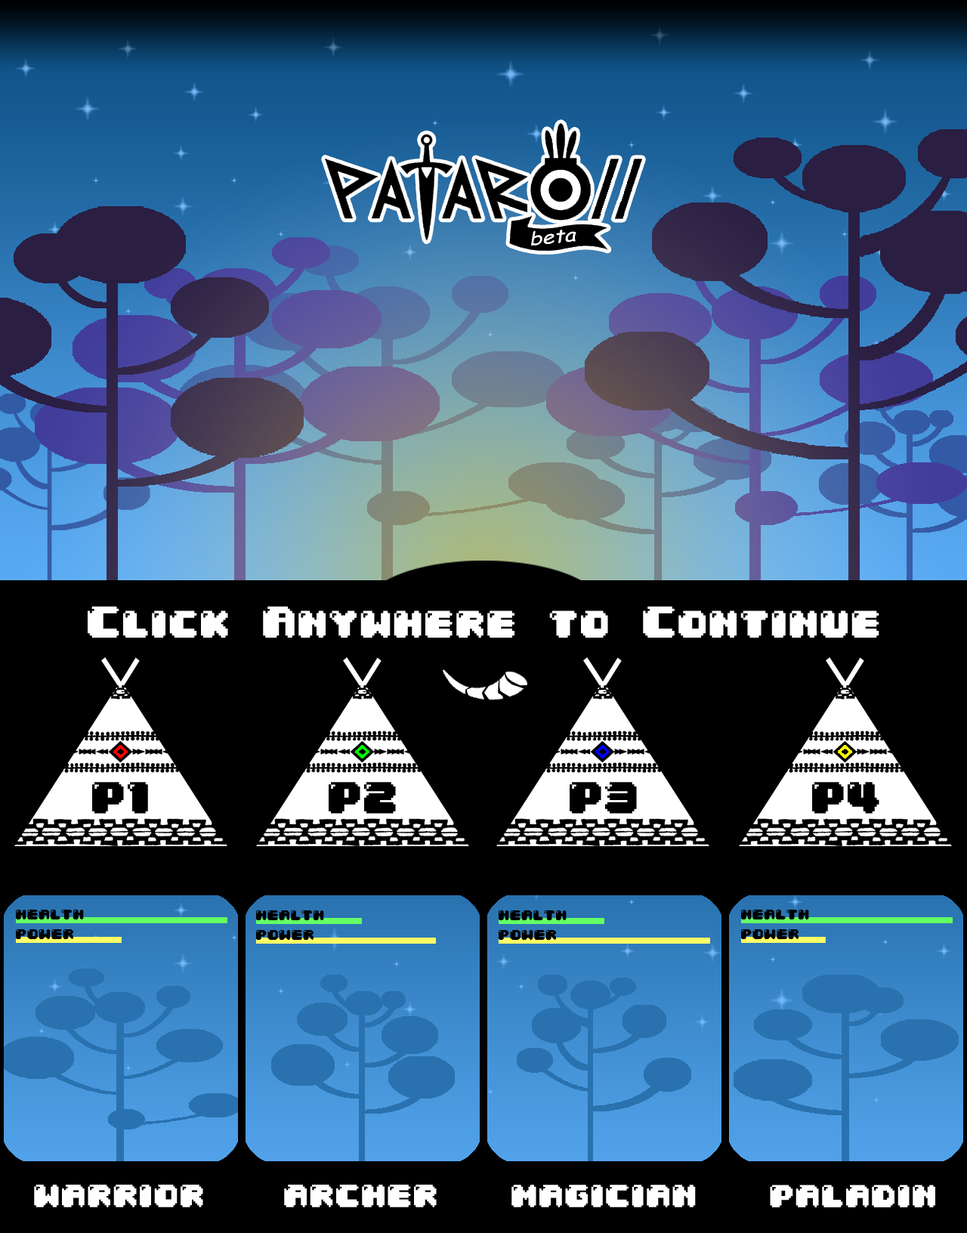
<style>
.page{position:relative;width:967px;height:1233px;background:#000000}
.page>*{position:absolute;margin:0}
.t1{font:37.8px "04b30";color:#ffffff}
.t2{font:14.2px "04b30";color:#000000}
.t3{font:31.5px "04b30";color:#ffffff}
</style>
<div class="page">
<p class="t1" style="left:88px;top:606px;width:791px;height:32px">Click Anywhere to Continue</p>
<p class="t2" style="left:16px;top:910px;width:68px;height:9px">health</p>
<p class="t2" style="left:256px;top:910px;width:68px;height:10px">health</p>
<p class="t2" style="left:499px;top:910px;width:68px;height:10px">health</p>
<p class="t2" style="left:741px;top:910px;width:68px;height:9px">health</p>
<p class="t2" style="left:16px;top:929px;width:57px;height:10px">power</p>
<p class="t2" style="left:741px;top:929px;width:58px;height:10px">power</p>
<p class="t2" style="left:256px;top:930px;width:58px;height:10px">power</p>
<p class="t2" style="left:499px;top:930px;width:57px;height:10px">power</p>
<p class="t3" style="left:34px;top:1185px;width:169px;height:22px">warrior</p>
<p class="t3" style="left:284px;top:1185px;width:153px;height:22px">archer</p>
<p class="t3" style="left:511px;top:1185px;width:185px;height:22px">magician</p>
<p class="t3" style="left:770px;top:1185px;width:165px;height:22px">paladin</p>
</div>
